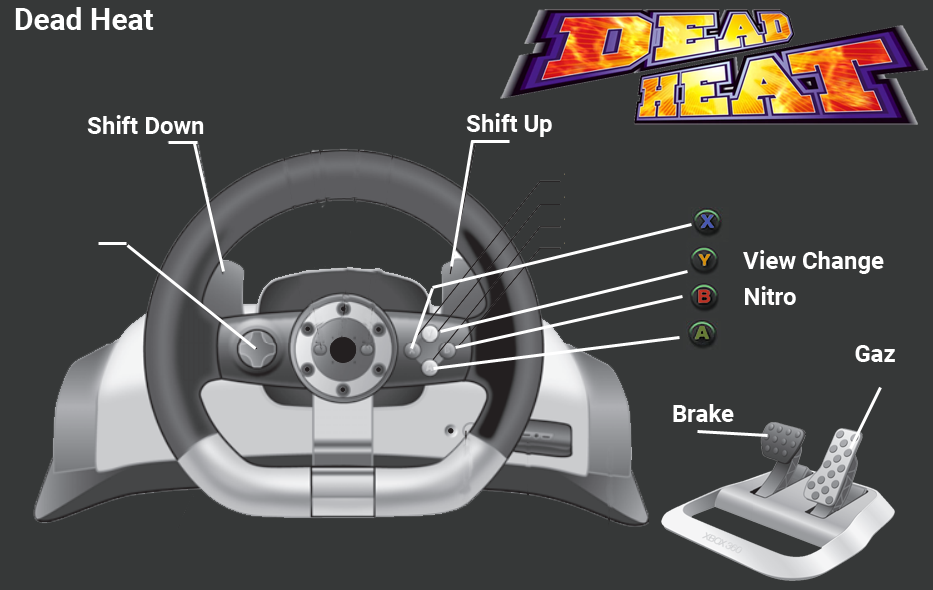
<style>
.page{position:relative;width:933px;height:590px;background:#363838}
.page>*{position:absolute;margin:0}
.t1{font:30px "Roboto-Bold";color:#ffffff}
.t2{font:24px "Roboto-Bold";color:#ffffff}
</style>
<div class="page">
<p class="t1" style="left:15px;top:7px;width:139px;height:23px">Dead Heat</p>
<p class="t2" style="left:466px;top:113px;width:86px;height:24px">Shift Up</p>
<p class="t2" style="left:87px;top:115px;width:117px;height:19px">Shift Down</p>
<p class="t2" style="left:743px;top:250px;width:141px;height:24px">View Change</p>
<p class="t2" style="left:745px;top:286px;width:51px;height:19px">Nitro</p>
<p class="t2" style="left:855px;top:345px;width:40px;height:17px">Gaz</p>
<p class="t2" style="left:673px;top:404px;width:61px;height:18px">Brake</p>
</div>
